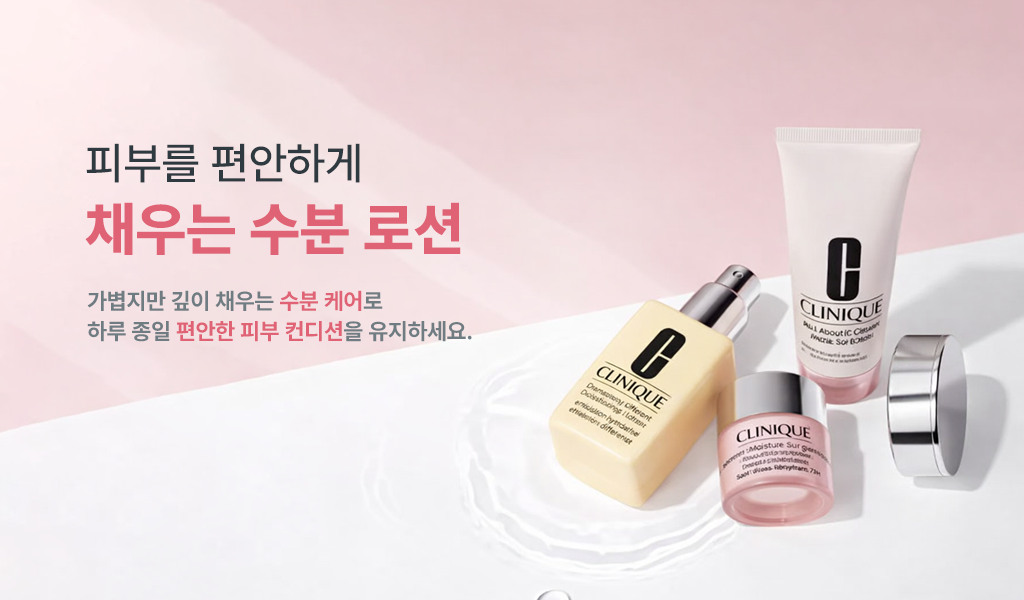
<style>
.page{position:relative;width:1024px;height:600px}
.page>*{position:absolute;margin:0}
.t1{font:58.3px/70.6px "Pretendard-ExtraBold";color:#df6375}
.t2{font:44.2px/70.6px "Pretendard-Medium";color:#2f3a40}
.t3{font:22.7px/30.3px "Pretendard-Bold";color:#6f7c82}
.t4{font:22.7px/30.3px "Pretendard-Bold";color:#df6375}
</style>
<div class="page">
<p class="t1" style="left:85px;top:143px;width:376px;height:112px"><span class="t2">피부를 편안하게<br></span>채우는 수분 로션</p>
<p class="t3" style="left:87px;top:290px;width:385px;height:52px">가볍지만 깊이 채우는 <span class="t4">수분 케어</span>로<br>하루 종일 <span class="t4">편안한 피부 컨디션</span>을 유지하세요.</p>
</div>
